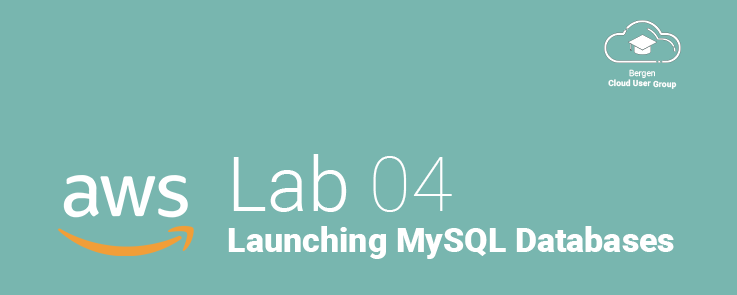
<style>
.page{position:relative;width:737px;height:295px;background:#78b6af}
.page>*{position:absolute;margin:0}
.t1{font:8.6px "Roboto-Bold";color:#ffffff}
.t2{font:8.6px "Roboto-Light";color:#ffffff}
.t3{font:34px "Roboto-Black";color:#ffffff}
.t4{font:76px "Roboto-Light";color:#ffffff}
.t5{font:76px "Roboto-Thin";color:#ffffff}
</style>
<div class="page">
<p class="t1" style="left:608px;top:69px;width:69px;height:20px;text-align:center"><span class="t2">Bergen<br></span>Cloud User Group</p>
<p class="t3" style="left:228px;top:154px;width:446px;height:105px"><span class="t4">Lab </span><span class="t5">04<br></span>Launching MySQL Databases</p>
</div>
